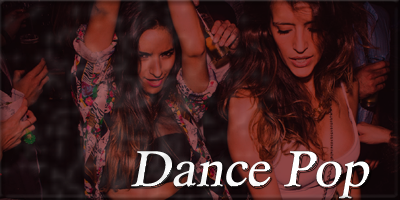
<style>
.page{position:relative;width:400px;height:200px}
.page>*{position:absolute;margin:0}
.t1{font:50px "Dutch801BT-Roman";letter-spacing:-0.025em;color:#ffffff;font-weight:bold;font-style:italic}
</style>
<div class="page">
<p class="t1" style="left:131px;top:151px;width:239px;height:48px">Dance Pop</p>
</div>
